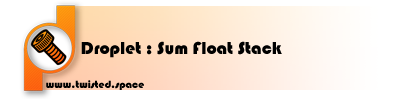
<style>
.page{position:relative;width:400px;height:100px;background:#ffffff}
.page>*{position:absolute;margin:0}
.t1{font:18px "Bauhaus93";color:#000000}
.t2{font:11px "Bauhaus93";color:#000000}
</style>
<div class="page">
<p class="t1" style="left:81px;top:41px;width:201px;height:17px">Droplet : Sum Float Stack</p>
<p class="t2" style="left:46px;top:80px;width:98px;height:10px">www.twisted.space</p>
</div>
